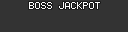
<style>
.page{position:relative;width:128px;height:32px;background:#333333}
.page>*{position:absolute;margin:0}
.t1{font:10px "Terminal";color:#fbfbfb}
</style>
<div class="page">
<p class="t1" style="left:29px;top:2px;width:71px;height:7px">BOSS JACKPOT</p>
</div>
